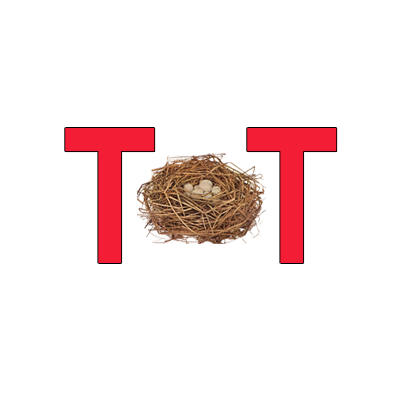
<style>
.page{position:relative;width:400px;height:400px;background:#ffffff}
.page>*{position:absolute;margin:0}
.t1{font:187.9px "Arial-BoldMT";color:#f31d36;scale:0.83 1}
</style>
<div class="page">
<p class="t1" style="left:65px;top:128px;width:272px;height:135px">T  T</p>
</div>
